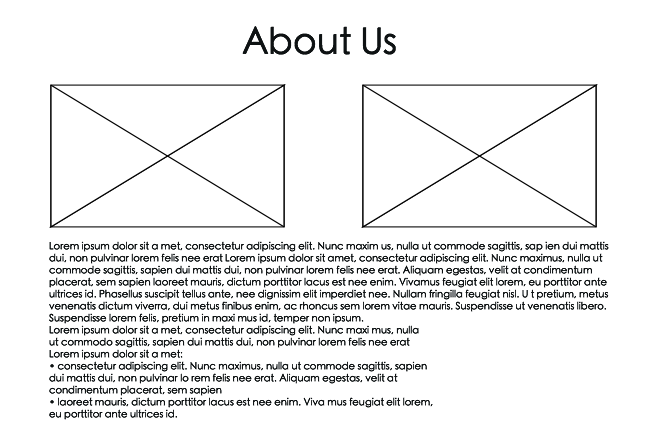
<style>
.page{position:relative;width:648px;height:432px;background:#ffffff}
.page>*{position:absolute;margin:0}
.t1{font:36px "STHeitiSC-Light";color:#0e1213}
.t2{font:10px "STHeitiSC-Light";color:#0e1213}
</style>
<div class="page">
<p class="t1" style="left:242px;top:26px;width:154px;height:29px">About Us</p>
<p class="t2" style="left:49px;top:241px;width:560px;height:179px">Lorem ipsum dolor sit a met, consectetur adipiscing elit. Nunc maxim us, nulla ut commode sagittis, sap ien dui mattis<br>dui, non pulvinar lorem felis nee erat Lorem ipsum dolor sit amet, consectetur adipiscing elit. Nunc maximus, nulla ut<br>commode sagittis, sapien dui mattis dui, non pulvinar lorem felis nee erat. Aliquam egestas, velit at condimentum<br>placerat, sem sapien laoreet mauris, dictum porttitor lacus est nee enim. Vivamus feugiat elit lorem, eu porttitor ante<br>ultrices id. Phasellus suscipit tellus ante, nee dignissim elit imperdiet nee. Nullam fringilla feugiat nisl. U t pretium, metus<br>venenatis dictum viverra, dui metus finibus enim, ac rhoncus sem lorem vitae mauris. Suspendisse ut venenatis libero.<br>Suspendisse lorem felis, pretium in maxi mus id, temper non ipsum.<br>Lorem ipsum dolor sit a met, consectetur adipiscing elit. Nunc maxi mus, nulla<br>ut commodo sagittis, sapien dui mattis dui, non pulvinar lorem felis nee erat<br>Lorem ipsum dolor sit a met:<br>• consectetur adipiscing elit. Nunc maximus, nulla ut commode sagittis, sapien<br>dui mattis dui, non pulvinar lo rem felis nee erat. Aliquam egestas, velit at<br>condimentum placerat, sem sapien<br>• laoreet mauris, dictum porttitor lacus est nee enim. Viva mus feugiat elit lorem,<br>eu porttitor ante ultrices id.</p>
</div>
